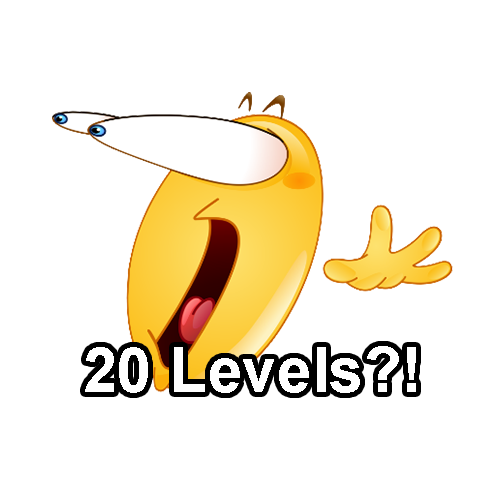
<style>
.page{position:relative;width:500px;height:500px;background:#ffffff}
.page>*{position:absolute;margin:0}
.t1{font:62.5px "Arial-BoldMT";color:#ffffff}
</style>
<div class="page">
<p class="t1" style="left:85px;top:346px;width:331px;height:47px">20 Levels?!</p>
</div>
